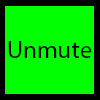
<style>
.page{position:relative;width:100px;height:100px;background:#00ff00}
.page>*{position:absolute;margin:0}
.t1{font:25px "MyriadPro-Regular";color:#000000}
</style>
<div class="page">
<p class="t1" style="left:8px;top:41px;width:84px;height:17px">Unmute</p>
</div>
